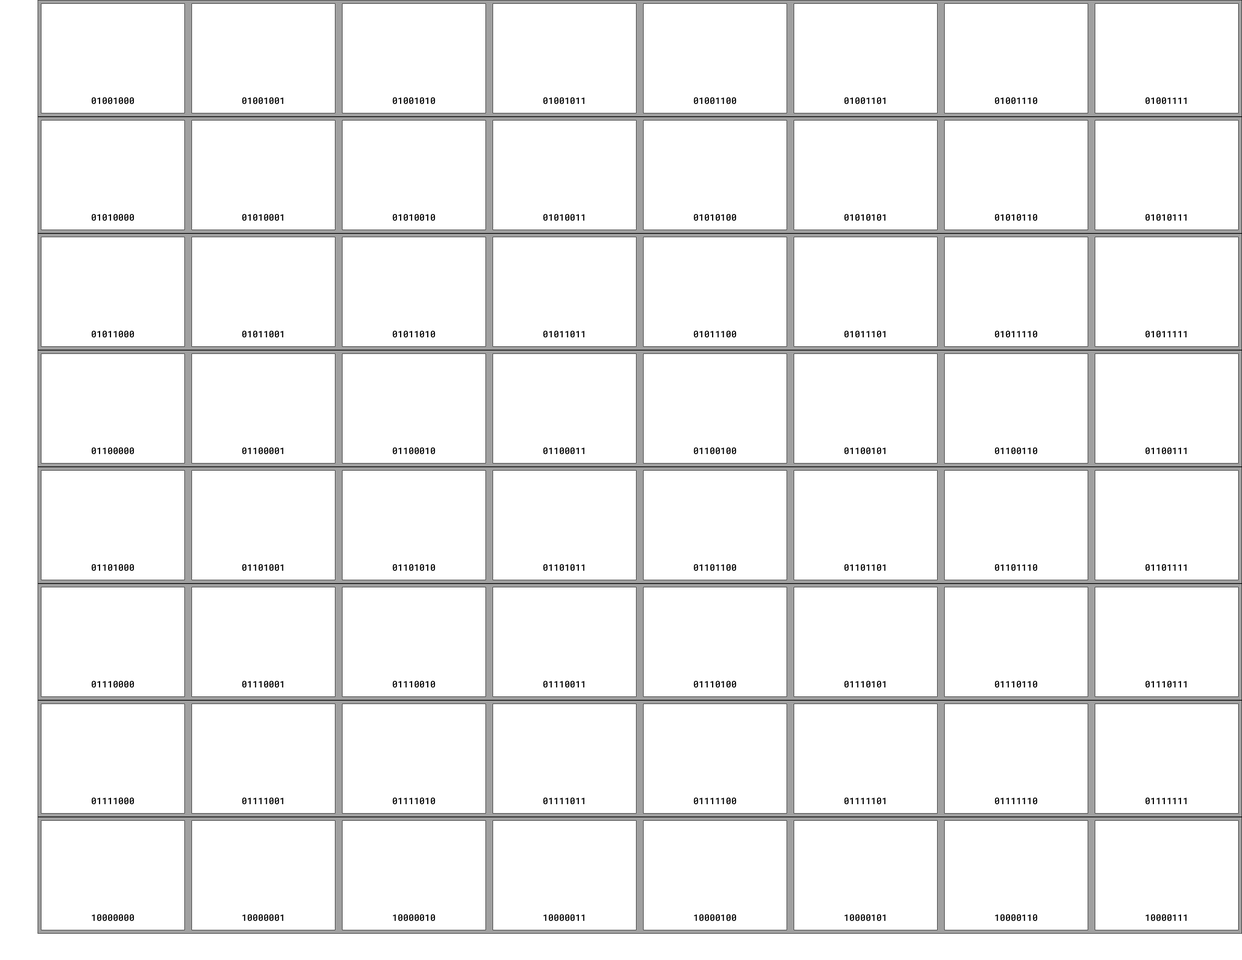
<style>
.page{position:relative;width:1242px;height:960px;background:#ffffff}
.page>*{position:absolute;margin:0}
.t1{font:9px "RobotoMono-Medium";color:#000000}
</style>
<div class="page">
<p class="t1" style="left:91px;top:97px;width:43px;height:7px">01001000</p>
<p class="t1" style="left:242px;top:97px;width:41px;height:7px">01001001</p>
<p class="t1" style="left:393px;top:97px;width:42px;height:7px">01001010</p>
<p class="t1" style="left:543px;top:97px;width:42px;height:7px">01001011</p>
<p class="t1" style="left:694px;top:97px;width:42px;height:7px">01001100</p>
<p class="t1" style="left:844px;top:97px;width:42px;height:7px">01001101</p>
<p class="t1" style="left:995px;top:97px;width:42px;height:7px">01001110</p>
<p class="t1" style="left:1145px;top:97px;width:42px;height:7px">01001111</p>
<p class="t1" style="left:91px;top:214px;width:43px;height:7px">01010000</p>
<p class="t1" style="left:242px;top:214px;width:41px;height:7px">01010001</p>
<p class="t1" style="left:393px;top:214px;width:42px;height:7px">01010010</p>
<p class="t1" style="left:543px;top:214px;width:42px;height:7px">01010011</p>
<p class="t1" style="left:694px;top:214px;width:42px;height:7px">01010100</p>
<p class="t1" style="left:844px;top:214px;width:42px;height:7px">01010101</p>
<p class="t1" style="left:995px;top:214px;width:42px;height:7px">01010110</p>
<p class="t1" style="left:1145px;top:214px;width:42px;height:7px">01010111</p>
<p class="t1" style="left:91px;top:331px;width:43px;height:7px">01011000</p>
<p class="t1" style="left:242px;top:331px;width:41px;height:7px">01011001</p>
<p class="t1" style="left:393px;top:331px;width:42px;height:7px">01011010</p>
<p class="t1" style="left:543px;top:331px;width:42px;height:7px">01011011</p>
<p class="t1" style="left:694px;top:331px;width:42px;height:7px">01011100</p>
<p class="t1" style="left:844px;top:331px;width:42px;height:7px">01011101</p>
<p class="t1" style="left:995px;top:331px;width:42px;height:7px">01011110</p>
<p class="t1" style="left:1145px;top:331px;width:42px;height:7px">01011111</p>
<p class="t1" style="left:91px;top:447px;width:43px;height:7px">01100000</p>
<p class="t1" style="left:242px;top:447px;width:41px;height:7px">01100001</p>
<p class="t1" style="left:393px;top:447px;width:42px;height:7px">01100010</p>
<p class="t1" style="left:543px;top:447px;width:42px;height:7px">01100011</p>
<p class="t1" style="left:694px;top:447px;width:42px;height:7px">01100100</p>
<p class="t1" style="left:844px;top:447px;width:42px;height:7px">01100101</p>
<p class="t1" style="left:995px;top:447px;width:42px;height:7px">01100110</p>
<p class="t1" style="left:1145px;top:447px;width:42px;height:7px">01100111</p>
<p class="t1" style="left:91px;top:564px;width:43px;height:7px">01101000</p>
<p class="t1" style="left:242px;top:564px;width:41px;height:7px">01101001</p>
<p class="t1" style="left:393px;top:564px;width:42px;height:7px">01101010</p>
<p class="t1" style="left:543px;top:564px;width:42px;height:7px">01101011</p>
<p class="t1" style="left:694px;top:564px;width:42px;height:7px">01101100</p>
<p class="t1" style="left:844px;top:564px;width:42px;height:7px">01101101</p>
<p class="t1" style="left:995px;top:564px;width:42px;height:7px">01101110</p>
<p class="t1" style="left:1145px;top:564px;width:42px;height:7px">01101111</p>
<p class="t1" style="left:91px;top:681px;width:43px;height:7px">01110000</p>
<p class="t1" style="left:242px;top:681px;width:41px;height:7px">01110001</p>
<p class="t1" style="left:393px;top:681px;width:42px;height:7px">01110010</p>
<p class="t1" style="left:543px;top:681px;width:42px;height:7px">01110011</p>
<p class="t1" style="left:694px;top:681px;width:42px;height:7px">01110100</p>
<p class="t1" style="left:844px;top:681px;width:42px;height:7px">01110101</p>
<p class="t1" style="left:995px;top:681px;width:42px;height:7px">01110110</p>
<p class="t1" style="left:1145px;top:681px;width:42px;height:7px">01110111</p>
<p class="t1" style="left:91px;top:797px;width:43px;height:7px">01111000</p>
<p class="t1" style="left:242px;top:797px;width:41px;height:7px">01111001</p>
<p class="t1" style="left:393px;top:797px;width:42px;height:7px">01111010</p>
<p class="t1" style="left:543px;top:797px;width:42px;height:7px">01111011</p>
<p class="t1" style="left:694px;top:797px;width:42px;height:7px">01111100</p>
<p class="t1" style="left:844px;top:797px;width:42px;height:7px">01111101</p>
<p class="t1" style="left:995px;top:797px;width:42px;height:7px">01111110</p>
<p class="t1" style="left:1145px;top:797px;width:42px;height:7px">01111111</p>
<p class="t1" style="left:92px;top:914px;width:42px;height:7px">10000000</p>
<p class="t1" style="left:242px;top:914px;width:41px;height:7px">10000001</p>
<p class="t1" style="left:393px;top:914px;width:42px;height:7px">10000010</p>
<p class="t1" style="left:544px;top:914px;width:41px;height:7px">10000011</p>
<p class="t1" style="left:694px;top:914px;width:42px;height:7px">10000100</p>
<p class="t1" style="left:845px;top:914px;width:41px;height:7px">10000101</p>
<p class="t1" style="left:995px;top:914px;width:42px;height:7px">10000110</p>
<p class="t1" style="left:1146px;top:914px;width:41px;height:7px">10000111</p>
</div>
